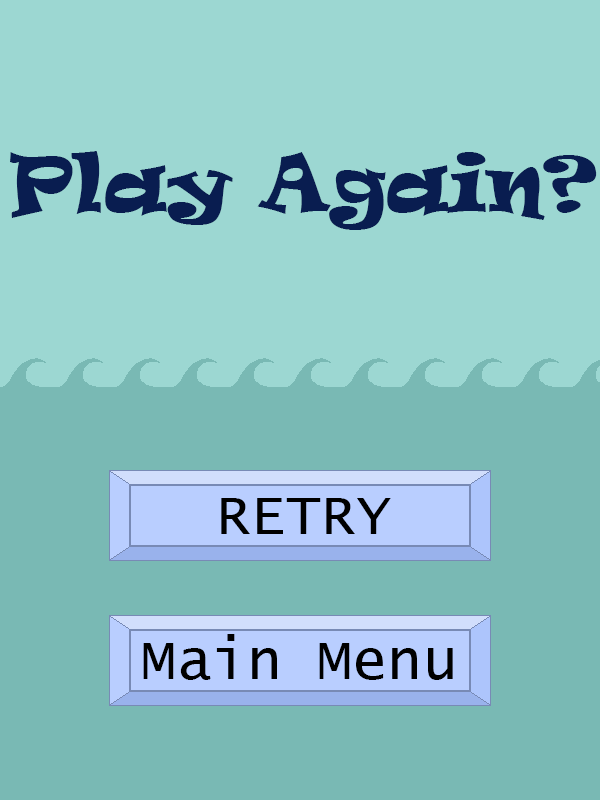
<style>
.page{position:relative;width:600px;height:800px;background:#9cd7d2}
.page>*{position:absolute;margin:0}
.t1{font:75px "Ravie";color:#091d50}
.t2{font:58.3px "LucidaConsole";color:#000000}
</style>
<div class="page">
<p class="t1" style="left:10px;top:151px;width:587px;height:79px">Play Again?</p>
<p class="t2" style="left:221px;top:498px;width:170px;height:36px">RETRY</p>
<p class="t2" style="left:143px;top:634px;width:310px;height:46px">Main Menu</p>
</div>
